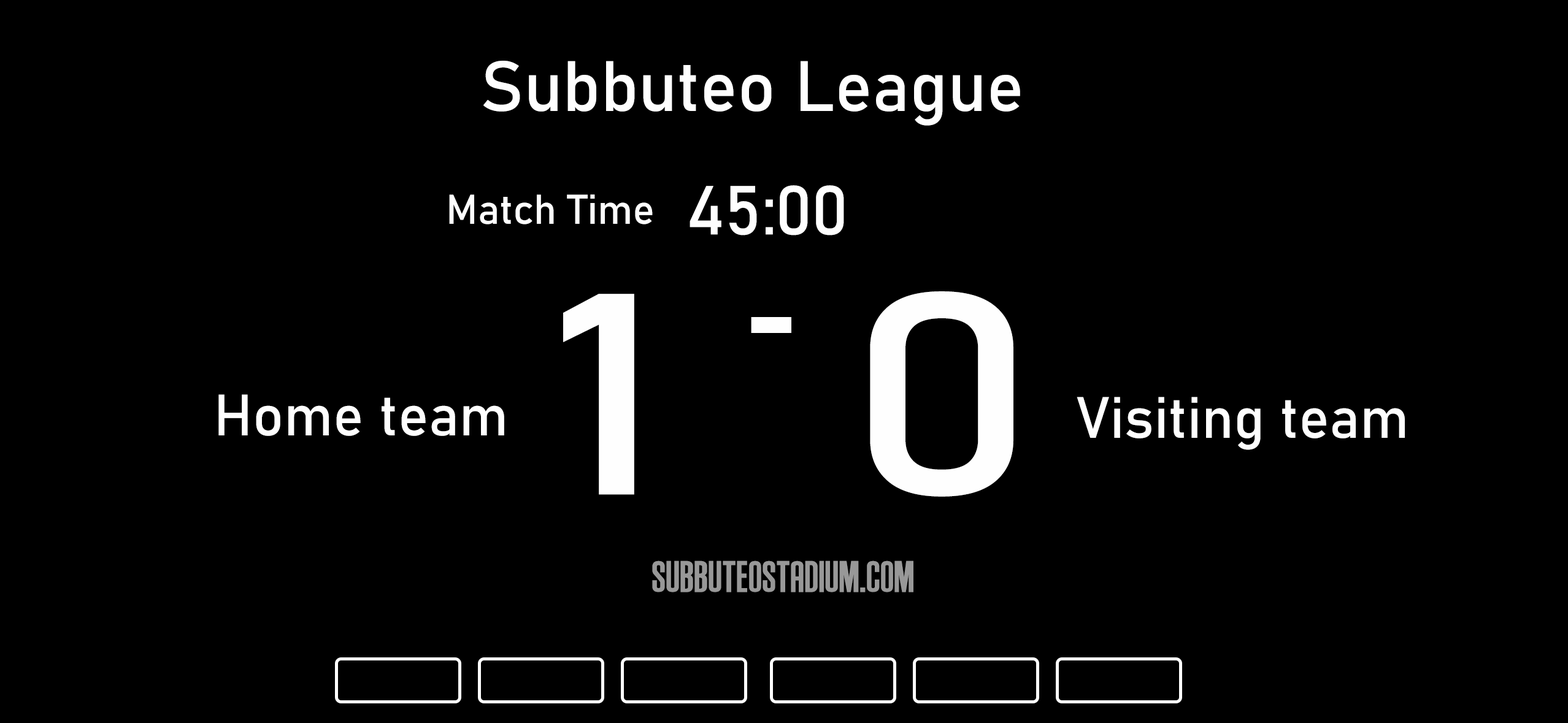
<style>
.page{position:relative;width:1568px;height:723px;background:#000000}
.page>*{position:absolute;margin:0}
.t1{font:70.1px "Bahnschrift";color:#fefefe}
.t2{font:68px "Bahnschrift";color:#fefefe}
.t3{font:41px "Bahnschrift";color:#fefefe}
.t4{font:282.5px "Bahnschrift";color:#fefefe;scale:1.25 1}
.t5{font:200.8px "AndersonSupercar";color:#fefefe}
.t6{font:57.4px "Bahnschrift";color:#fefefe}
.t7{font:44.4px "AndersonSupercar";color:#989898}
</style>
<div class="page">
<p class="t1" style="left:483px;top:61px;width:537px;height:65px">Subbuteo League</p>
<p class="t2" style="left:690px;top:185px;width:154px;height:51px">45:00</p>
<p class="t3" style="left:449px;top:194px;width:204px;height:31px">Match Time</p>
<p class="t4" style="left:563px;top:291px;width:450px;height:206px">1    0</p>
<p class="t5" style="left:751px;top:317px;width:40px;height:16px">-</p>
<p class="t6" style="left:218px;top:394px;width:286px;height:42px">Home team</p>
<p class="t6" style="left:1077px;top:397px;width:328px;height:53px">Visiting team</p>
<p class="t7" style="left:652px;top:561px;width:261px;height:32px">SUBBUTEOSTADIUM.COM</p>
</div>
